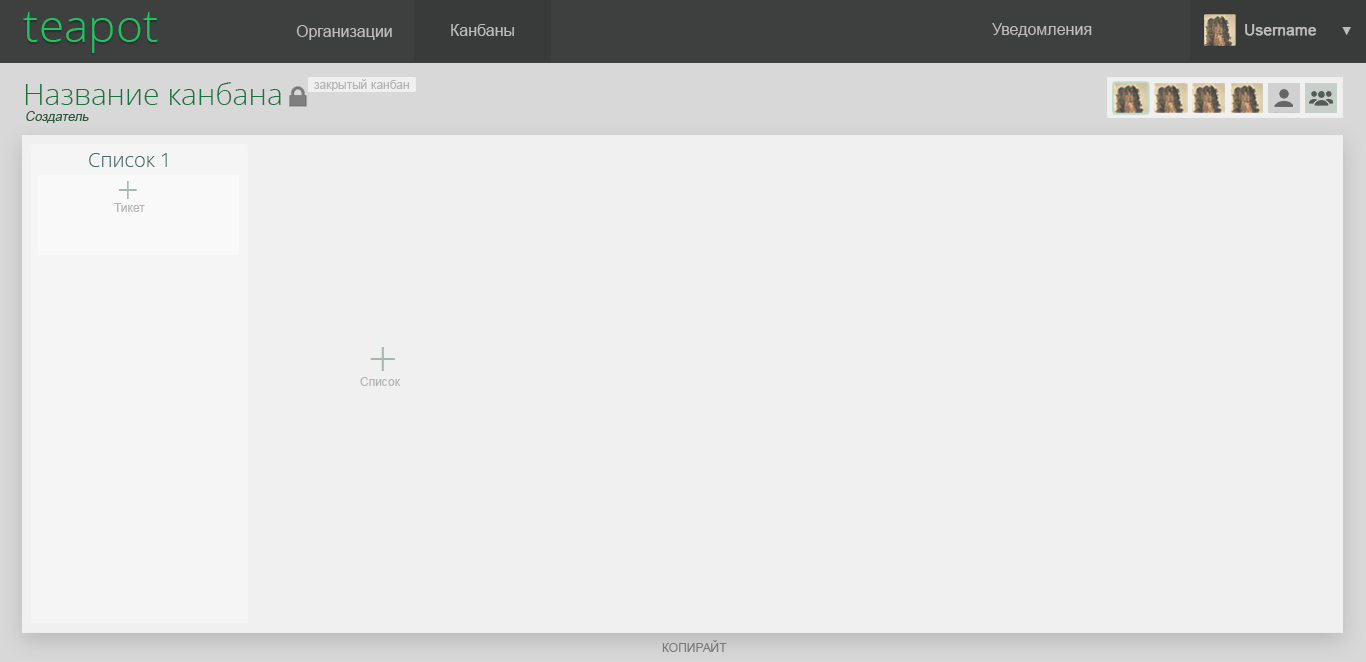
<style>
.page{position:relative;width:1366px;height:662px;background:#f0f0f0}
.page>*{position:absolute;margin:0}
.t1{font:46px "OpenSans-Light";color:#1dc45f}
.t2{font:16px "ArialMT";color:#bdbbbb}
.t3{font:15px "ArialMT";color:#bdbbbb;font-weight:bold}
.t4{font:12.3px "ArialMT";color:#bdbbbb}
.t5{font:30px "OpenSans-Light";color:#1c713e}
.t6{font:12px "ArialMT";color:#b5b5b5}
.t7{font:13px "ArialMT";color:#2c583d;font-style:italic}
.t8{font:20px "OpenSans-Light";color:#456b68}
.t9{font:38px "OpenSans-Light";color:#a5b8ad}
.t10{font:52px "OpenSans-Light";color:#a5b8ad}
.t11{font:12px "ArialMT";color:#7b7a7a}
</style>
<div class="page">
<p class="t1" style="left:23px;top:12px;width:135px;height:41px">teapot</p>
<p class="t2" style="left:296px;top:25px;width:96px;height:15px">Организации</p>
<p class="t2" style="left:451px;top:24px;width:63px;height:12px">Канбаны</p>
<p class="t2" style="left:992px;top:23px;width:100px;height:14px">Уведомления</p>
<p class="t3" style="left:1245px;top:24px;width:71px;height:12px">Username</p>
<p class="t4" style="left:1342px;top:27px;width:9px;height:8px">▼</p>
<p class="t5" style="left:25px;top:82px;width:256px;height:23px">Название канбана</p>
<p class="t6" style="left:314px;top:79px;width:95px;height:12px">закрытый канбан</p>
<p class="t7" style="left:26px;top:111px;width:63px;height:12px">Создатель</p>
<p class="t8" style="left:89px;top:153px;width:78px;height:14px">Список 1</p>
<p class="t9" style="left:118px;top:181px;width:19px;height:18px">+</p>
<p class="t6" style="left:114px;top:203px;width:31px;height:9px">Тикет</p>
<p class="t10" style="left:370px;top:347px;width:25px;height:24px">+</p>
<p class="t6" style="left:360px;top:377px;width:41px;height:9px">Список</p>
<p class="t11" style="left:662px;top:640px;width:65px;height:12px">КОПИРАЙТ</p>
</div>
